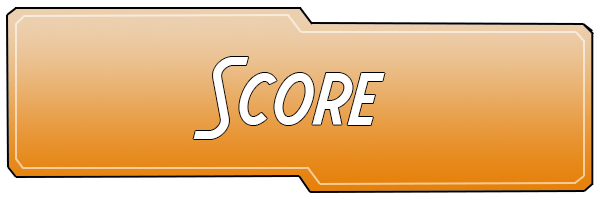
<style>
.page{position:relative;width:600px;height:200px}
.page>*{position:absolute;margin:0}
.t1{font:100px "AeroviasBrasilNF";color:#ffffff}
</style>
<div class="page">
<p class="t1" style="left:193px;top:57px;width:192px;height:82px">Score</p>
</div>
